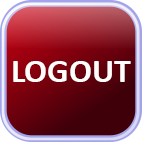
<style>
.page{position:relative;width:142px;height:142px}
.page>*{position:absolute;margin:0}
.t1{font:34px "Calibri-Bold";color:#fefffd}
</style>
<div class="page">
<p class="t1" style="left:13px;top:61px;width:118px;height:21px">LOGOUT</p>
</div>
